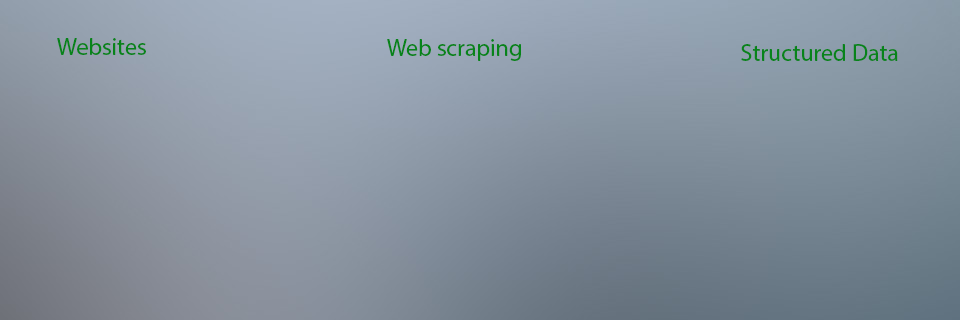
<style>
.page{position:relative;width:960px;height:320px}
.page>*{position:absolute;margin:0}
.t1{font:24px "MyriadPro-Regular";color:#07831a}
</style>
<div class="page">
<p class="t1" style="left:57px;top:38px;width:89px;height:17px">Websites</p>
<p class="t1" style="left:387px;top:39px;width:134px;height:22px">Web scraping</p>
<p class="t1" style="left:741px;top:44px;width:157px;height:17px">Structured Data</p>
</div>
